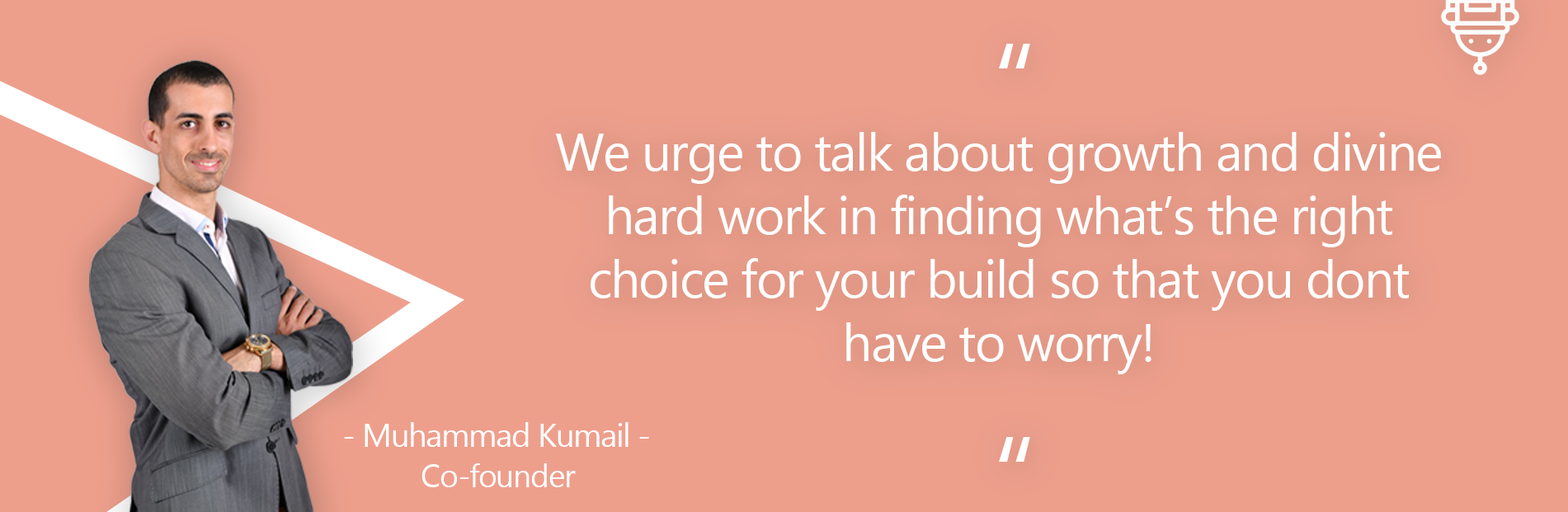
<style>
.page{position:relative;width:1568px;height:512px;background:#ed9f8c}
.page>*{position:absolute;margin:0}
.t1{font:112.6px "SegoeUI";letter-spacing:-0.03em;color:#ffffff}
.t2{font:52.8px "SegoeUI";letter-spacing:-0.03em;color:#ffffff}
.t3{font:32.7px "SegoeUI";letter-spacing:-0.03em;color:#ffffff}
.t4{font:31.9px "SegoeUI";letter-spacing:-0.03em;color:#ffffff}
</style>
<div class="page">
<p class="t1" style="left:999px;top:44px;width:31px;height:24px">“</p>
<p class="t2" style="left:555px;top:132px;width:886px;height:242px;text-align:center">We urge to talk about growth and divine hard work in finding what’s the right choice for your build so that you dont have to worry!</p>
<p class="t3" style="left:344px;top:422px;width:305px;height:25px">- Muhammad Kumail -</p>
<p class="t1" style="left:999px;top:437px;width:31px;height:25px">“</p>
<p class="t4" style="left:421px;top:464px;width:155px;height:23px">Co-founder</p>
</div>
